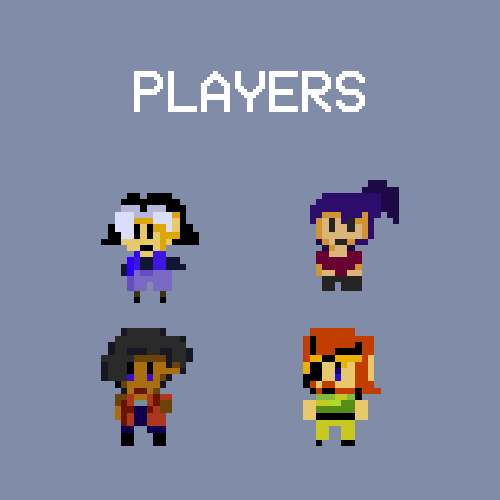
<style>
.page{position:relative;width:500px;height:500px;background:#808ca8}
.page>*{position:absolute;margin:0}
.t1{font:59.9px "VCROSDMono";letter-spacing:-0.025em;color:#ffffff}
</style>
<div class="page">
<p class="t1" style="left:134px;top:71px;width:231px;height:41px">PLAYERS</p>
</div>
